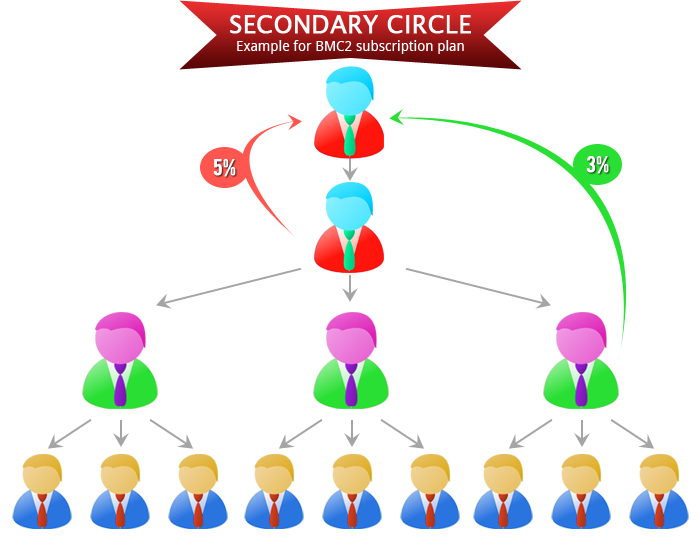
<style>
.page{position:relative;width:700px;height:550px;background:#ffffff}
.page>*{position:absolute;margin:0}
.t1{font:24px "LucidaSans";color:#ffffff;text-transform:uppercase;font-weight:bold}
.t2{font:14px "DroidSans";color:#ffffff}
.t3{font:18px "Bebas";color:#ffffff;font-weight:bold}
</style>
<div class="page">
<p class="t1" style="left:230px;top:15px;width:241px;height:19px">Secondary Circle</p>
<p class="t2" style="left:237px;top:40px;width:227px;height:14px">Example for BMC2 subscription plan</p>
<p class="t3" style="left:213px;top:159px;width:23px;height:18px">5%</p>
<p class="t3" style="left:586px;top:156px;width:23px;height:18px">3%</p>
</div>
